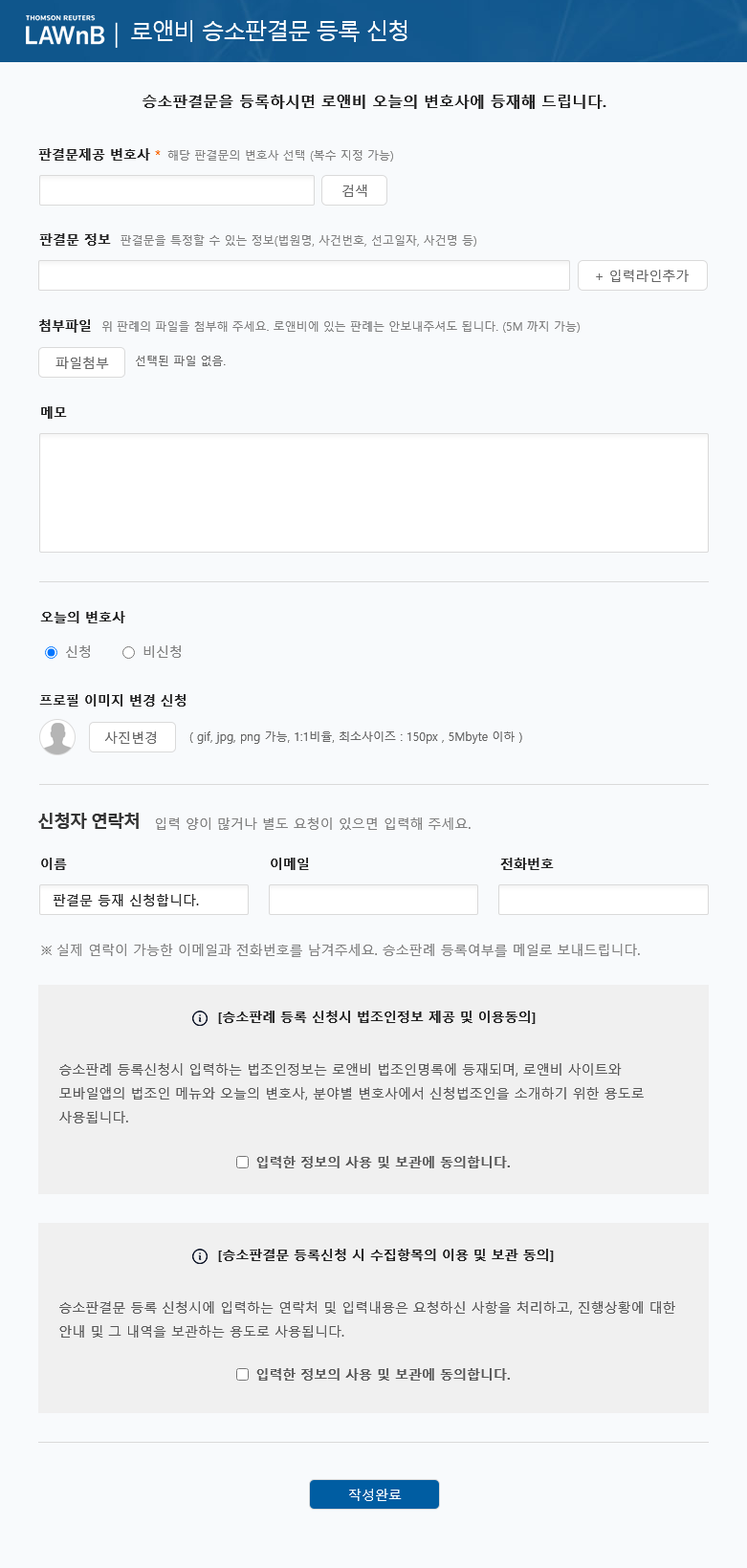
<style>
.page{position:relative;width:747px;height:1568px;background:#f8fafc}
.page>*{position:absolute;margin:0}
.t1{font:22.9px "MalgunGothic";letter-spacing:-0.06em;color:#ffffff}
.t2{font:15.3px "MalgunGothicBold";color:#212121}
.t3{font:11.5px "MalgunGothic";color:#7f7f7f}
.t4{font:13.4px "MalgunGothicBold";color:#212121}
.t5{font:13.4px "MalgunGothic";letter-spacing:-0.06em;color:#fa6400}
.t6{font:13.4px "MalgunGothic";color:#666666}
.t7{font:11.5px "MalgunGothic";color:#666666}
.t8{font:13.4px "MalgunGothic";color:#7f7f7f}
.t9{font:17.2px "MalgunGothicBold";letter-spacing:-0.06em;color:#333333}
.t10{font:13.4px "MalgunGothic";color:#212121}
.t11{font:13.4px/23.9px "MalgunGothic";color:#585858}
.t12{font:13.4px "MalgunGothicBold";color:#585858}
.t13{font:13.4px "MalgunGothic";color:#ffffff}
</style>
<div class="page">
<p class="t1" style="left:131px;top:20px;width:276px;height:22px">로앤비 승소판결문 등록 신청</p>
<p class="t2" style="left:142px;top:95px;width:464px;height:14px">승소판결문을 등록하시면 로앤비 오늘의 변호사에 등재해 드립니다.</p>
<p class="t3" style="left:38px;top:148px;width:355px;height:14px"><span class="t4">판결문제공 변호사 </span><span class="t5">*  </span>해당 판결문의 변호사 선택 (복수 지정 가능)</p>
<p class="t6" style="left:342px;top:185px;width:25px;height:12px">검색</p>
<p class="t3" style="left:39px;top:233px;width:437px;height:14px"><span class="t4">판결문 정보  </span>판결문을 특정할 수 있는 정보(법원명, 사건번호, 선고일자, 사건명 등)</p>
<p class="t6" style="left:596px;top:270px;width:92px;height:12px">+ 입력라인추가</p>
<p class="t3" style="left:39px;top:319px;width:540px;height:14px"><span class="t4">첨부파일  </span>위 판례의 파일을 첨부해 주세요. 로앤비에 있는 판례는 안보내주셔도 됩니다. (5M 까지 가능)</p>
<p class="t6" style="left:55px;top:357px;width:54px;height:12px">파일첨부</p>
<p class="t7" style="left:136px;top:356px;width:90px;height:10px">선택된 파일 없음.</p>
<p class="t4" style="left:41px;top:406px;width:26px;height:13px">메모</p>
<p class="t4" style="left:40px;top:611px;width:85px;height:12px">오늘의 변호사</p>
<p class="t8" style="left:66px;top:645px;width:24px;height:13px">신청</p>
<p class="t8" style="left:143px;top:645px;width:38px;height:13px">비신청</p>
<p class="t4" style="left:39px;top:694px;width:146px;height:13px">프로필 이미지 변경 신청</p>
<p class="t6" style="left:105px;top:731px;width:51px;height:13px">사진변경</p>
<p class="t7" style="left:189px;top:731px;width:333px;height:13px">( gif, jpg, png 가능, 1:1비율, 최소사이즈 : 150px , 5Mbyte 이하 )</p>
<p class="t9" style="left:38px;top:813px;width:101px;height:16px">신청자 연락처</p>
<p class="t8" style="left:156px;top:817px;width:314px;height:13px">입력 양이 많거나 별도 요청이 있으면 입력해 주세요.</p>
<p class="t4" style="left:41px;top:858px;width:26px;height:12px">이름</p>
<p class="t4" style="left:271px;top:858px;width:38px;height:12px">이메일</p>
<p class="t4" style="left:500px;top:858px;width:54px;height:12px">전화번호</p>
<p class="t10" style="left:54px;top:894px;width:145px;height:12px">판결문 등재 신청합니다.</p>
<p class="t8" style="left:41px;top:944px;width:599px;height:13px">※ 실제 연락이 가능한 이메일과 전화번호를 남겨주세요. 승소판례 등록여부를 메일로 보내드립니다.</p>
<p class="t4" style="left:218px;top:1011px;width:317px;height:13px">[승소판례 등록 신청시 법조인정보 제공 및 이용동의]</p>
<p class="t11" style="left:59px;top:1063px;width:584px;height:60px">승소판례 등록신청시 입력하는 법조인정보는 로앤비 법조인명록에 등재되며, 로앤비 사이트와 모바일앱의 법조인 메뉴와 오늘의 변호사, 분야별 변호사에서 신청법조인을 소개하기 위한 용도로 사용됩니다.</p>
<p class="t12" style="left:256px;top:1156px;width:254px;height:12px">입력한 정보의 사용 및 보관에 동의합니다.</p>
<p class="t4" style="left:218px;top:1249px;width:336px;height:13px">[승소판결문 등록신청 시 수집항목의 이용 및 보관 동의]</p>
<p class="t11" style="left:59px;top:1301px;width:616px;height:37px">승소판결문 등록 신청시에 입력하는 연락처 및 입력내용은 요청하신 사항을 처리하고, 진행상황에 대한 안내 및 그 내역을 보관하는 용도로 사용됩니다.</p>
<p class="t12" style="left:256px;top:1368px;width:254px;height:13px">입력한 정보의 사용 및 보관에 동의합니다.</p>
<p class="t13" style="left:349px;top:1489px;width:53px;height:12px">작성완료</p>
</div>
